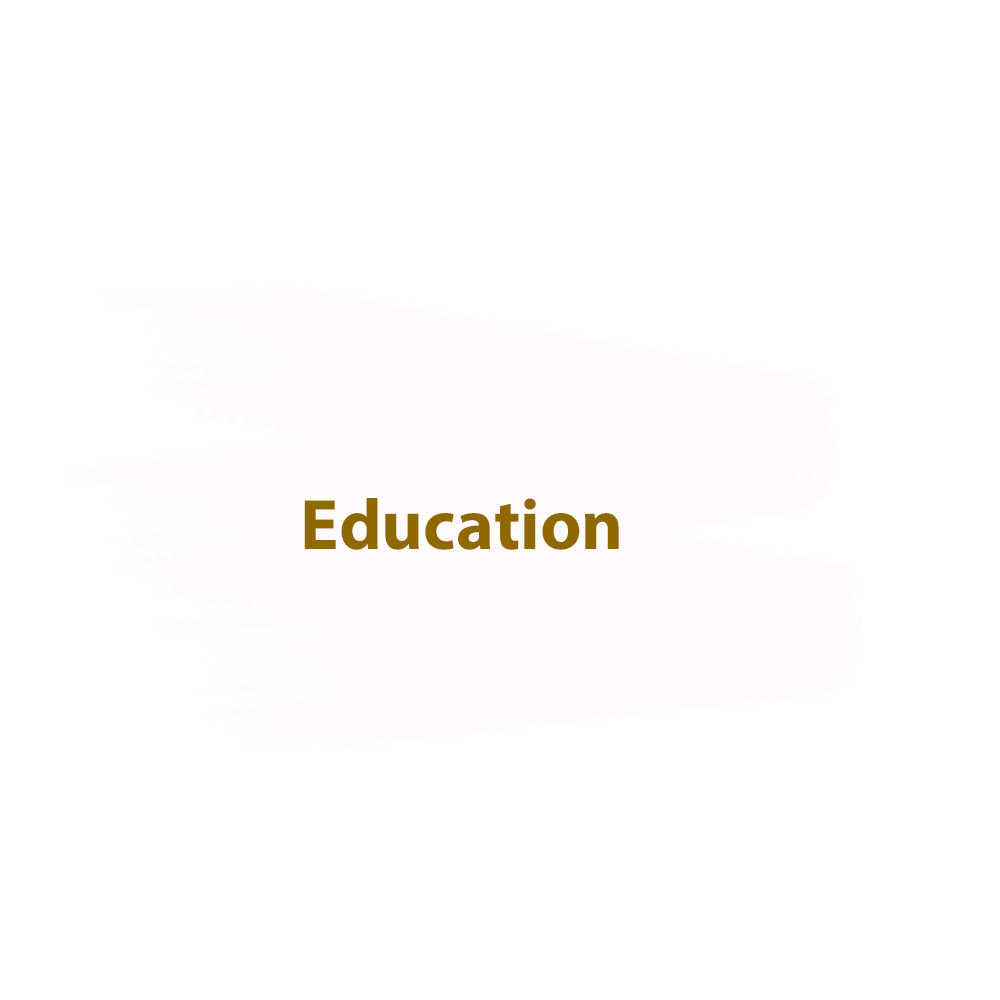
<style>
.page{position:relative;width:1000px;height:1000px;background:#ffffff}
.page>*{position:absolute;margin:0}
.t1{font:72px "MyriadPro-Bold";color:#906800}
</style>
<div class="page">
<p class="t1" style="left:304px;top:498px;width:315px;height:52px">Education</p>
</div>
